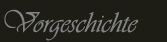
<style>
.page{position:relative;width:167px;height:42px;background:#1d1d16}
.page>*{position:absolute;margin:0}
.t1{font:30px "VivanteDTCITALIC";color:#838383}
</style>
<div class="page">
<p class="t1" style="left:4px;top:9px;width:135px;height:32px">Vorgeschichte</p>
</div>
